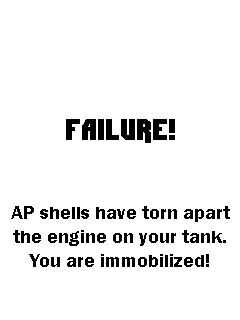
<style>
.page{position:relative;width:240px;height:320px;background:#ffffff}
.page>*{position:absolute;margin:0}
.t1{font:30px "Dimitri";color:#000000}
.t2{font:20px "FranklinGothic-Demi";color:#000000}
</style>
<div class="page">
<p class="t1" style="left:66px;top:119px;width:109px;height:24px">FAILURE!</p>
<p class="t2" style="left:11px;top:206px;width:219px;height:61px;text-align:center">AP shells have torn apart<br>the engine on your tank.<br>You are immobilized!</p>
</div>
